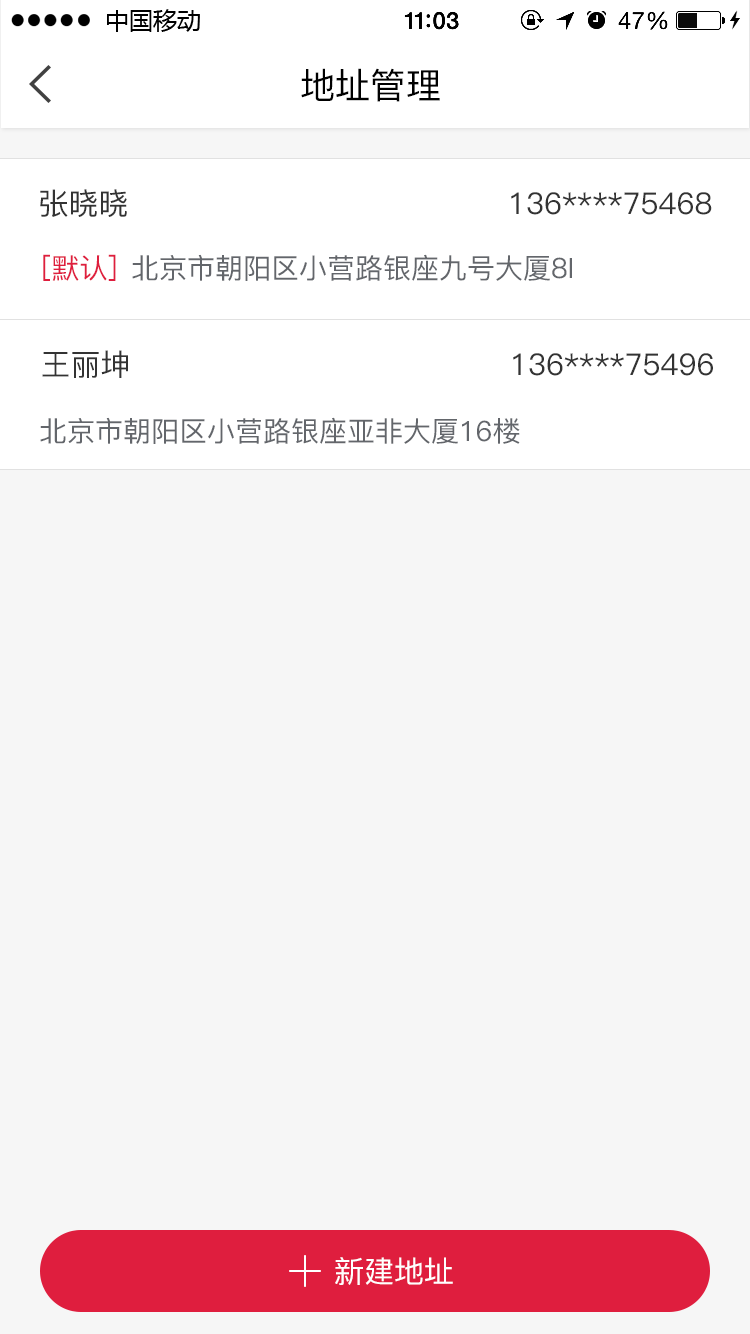
<style>
.page{position:relative;width:750px;height:1334px;background:#f6f6f6}
.page>*{position:absolute;margin:0}
.t1{font:35.7px "PingFang-SC-Medium";color:#000000}
.t2{font:30px "PingFang-SC-Medium";color:#333333}
.t3{font:28px "PingFang-SC-Medium";color:#df1e3e}
.t4{font:28px "PingFang-SC-Medium";color:#63666b}
.t5{font:30px "PingFang-SC-Medium";color:#ffffff}
</style>
<div class="page">
<p class="t1" style="left:301px;top:68px;width:139px;height:34px">地址管理</p>
<p class="t2" style="left:40px;top:189px;width:672px;height:28px">张晓晓                                      136****75468</p>
<p class="t3" style="left:43px;top:254px;width:73px;height:27px">[默认]</p>
<p class="t4" style="left:132px;top:254px;width:440px;height:27px">北京市朝阳区小营路银座九号大厦8I</p>
<p class="t2" style="left:42px;top:350px;width:671px;height:28px">王丽坤                                      136****75496</p>
<p class="t4" style="left:40px;top:417px;width:480px;height:27px">北京市朝阳区小营路银座亚非大厦16楼</p>
<p class="t5" style="left:335px;top:1257px;width:118px;height:28px">新建地址</p>
</div>
